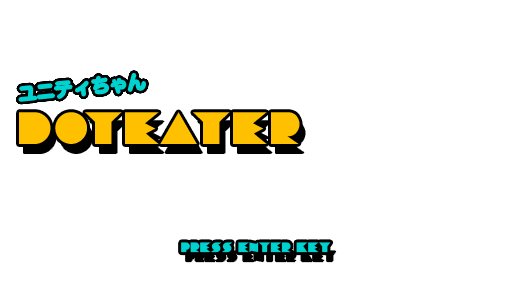
<style>
.page{position:relative;width:512px;height:288px;background:#ffffff}
.page>*{position:absolute;margin:0}
.t1{font:43.9px "ChainsawGeometric";color:#ffc000}
.t2{font:13.1px "ChainsawGeometric";letter-spacing:0.05em;color:#00d2d0}
</style>
<div class="page">
<p class="t1" style="left:19px;top:112px;width:281px;height:32px">DOTEATER</p>
<p class="t2" style="left:181px;top:242px;width:150px;height:11px">PRESS ENTER KEY</p>
</div>
